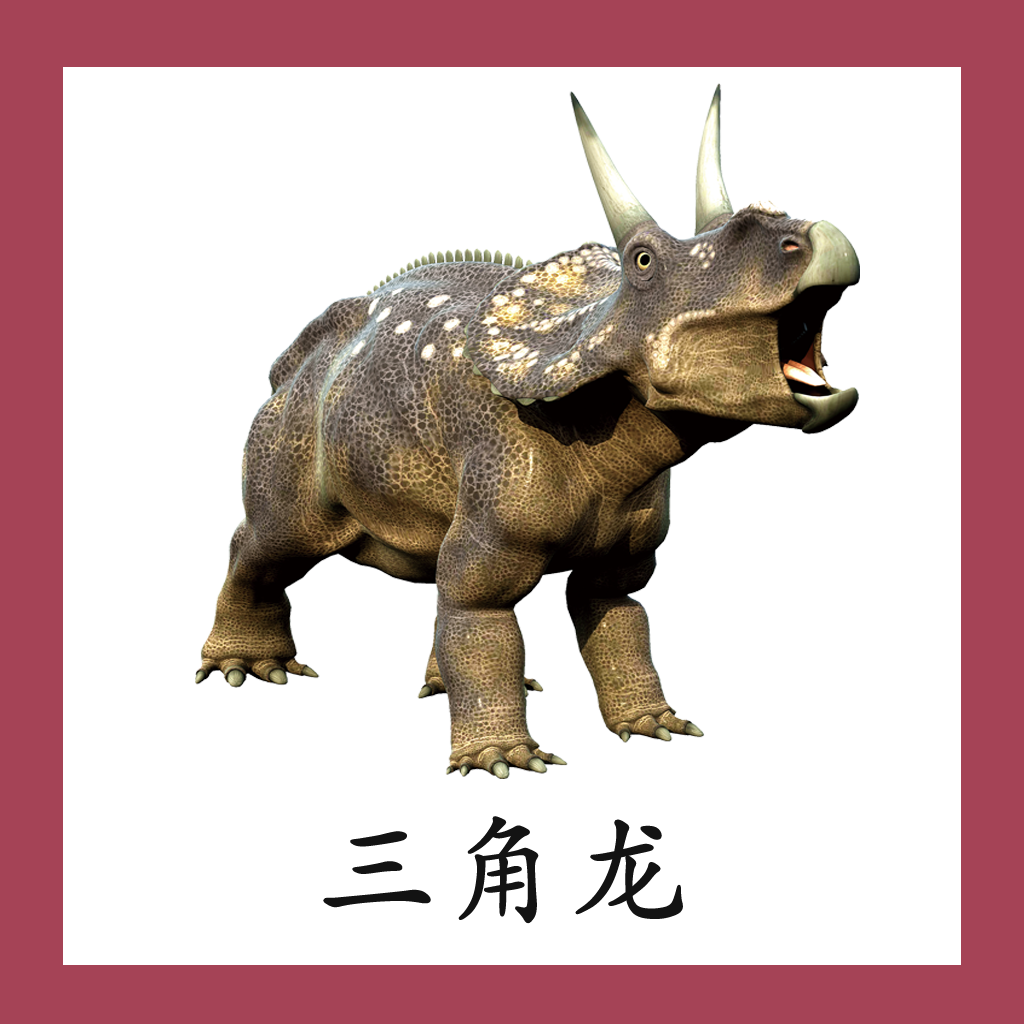
<style>
.page{position:relative;width:1024px;height:1024px;background:#ffffff}
.page>*{position:absolute;margin:0}
.t1{font:120.7px "STKaiti";color:#131313;font-weight:bold}
</style>
<div class="page">
<p class="t1" style="left:323px;top:816px;width:360px;height:108px">三角龙</p>
</div>
